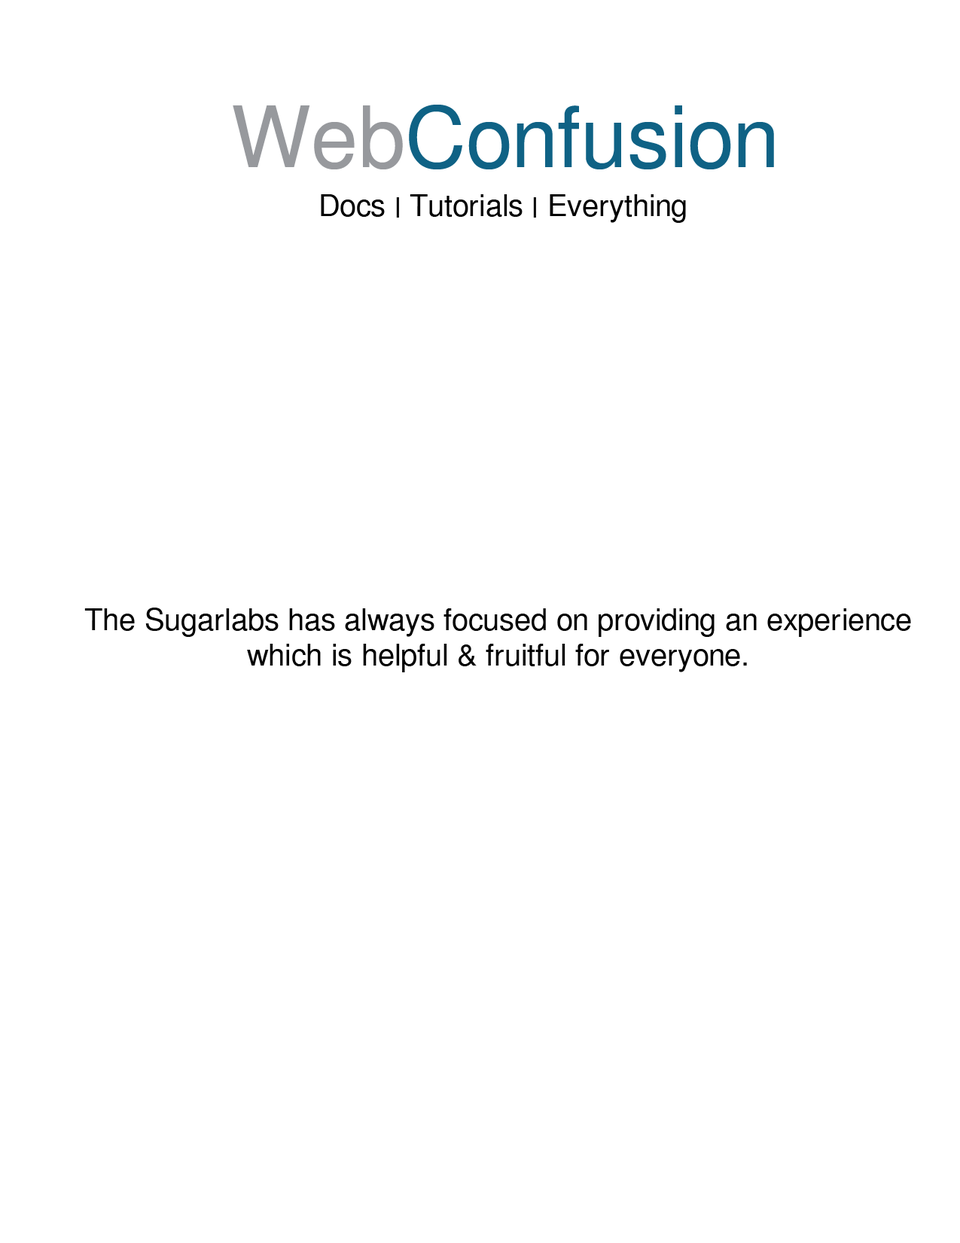
<style>
.page{position:relative;width:960px;height:1243px;background:#ffffff}
.page>*{position:absolute;margin:0}
.t1{font:84.6px "PhetsarathOT";color:#0f6285}
.t2{font:84.6px "PhetsarathOT";color:#97999d}
.t3{font:29.8px "PhetsarathOT";color:#000000}
</style>
<div class="page">
<p class="t1" style="left:233px;top:105px;width:541px;height:64px"><span class="t2">Web</span>Confusion</p>
<p class="t3" style="left:321px;top:194px;width:365px;height:29px">Docs | Tutorials | Everything</p>
<p class="t3" style="left:84px;top:607px;width:827px;height:65px;text-align:center">The Sugarlabs has always focused on providing an experience<br>which is helpful &amp; fruitful for everyone.</p>
</div>
